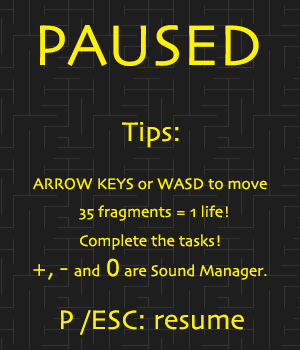
<style>
.page{position:relative;width:300px;height:350px;background:#1f1e1e}
.page>*{position:absolute;margin:0}
.t1{font:60px "Skia-Regular";color:#fff200}
.t2{font:28px "Skia-Regular";color:#fff200}
.t3{font:16px "Skia-Regular";color:#fff200}
.t4{font:24px "Skia-Regular";color:#fff200}
.t5{font:24px "ArialMT";color:#fff200}
</style>
<div class="page">
<p class="t1" style="left:40px;top:25px;width:219px;height:41px">PAUSED</p>
<p class="t2" style="left:122px;top:122px;width:57px;height:26px">Tips:</p>
<p class="t3" style="left:33px;top:178px;width:234px;height:12px">ARROW KEYS or WASD to move</p>
<p class="t3" style="left:79px;top:205px;width:149px;height:16px">35 fragments = 1 life!</p>
<p class="t3" style="left:80px;top:234px;width:140px;height:16px">Complete the tasks!</p>
<p class="t3" style="left:33px;top:258px;width:234px;height:22px"><span class="t4">+, - </span>and <span class="t5">0 </span>are Sound Manager.</p>
<p class="t2" style="left:61px;top:310px;width:183px;height:25px">P /ESC: resume</p>
</div>
